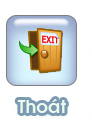
<style>
.page{position:relative;width:92px;height:131px;background:#ffffff}
.page>*{position:absolute;margin:0}
.t1{font:18px "VNI-Avo-Bold";color:#eef9ef}
</style>
<div class="page">
<p class="t1" style="left:17px;top:99px;width:49px;height:14px">Thoaùt</p>
</div>
